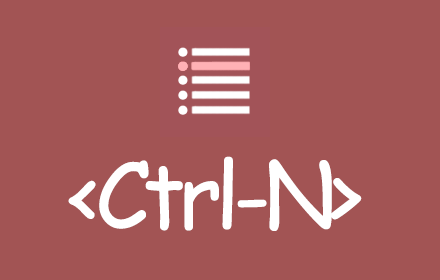
<style>
.page{position:relative;width:440px;height:280px;background:#a25454}
.page>*{position:absolute;margin:0}
.t1{font:90px "ComicSansMS";letter-spacing:-0.075em;color:#ffffff}
</style>
<div class="page">
<p class="t1" style="left:68px;top:156px;width:294px;height:75px">&lt;Ctrl-N&gt;</p>
</div>
